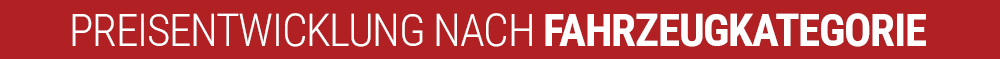
<style>
.page{position:relative;width:1000px;height:59px;background:#b12023}
.page>*{position:absolute;margin:0}
.t1{font:45.3px "RobotoCondensed-Light";letter-spacing:-0.03em;color:#ffffff}
.t2{font:45.3px "RobotoCondensed-Bold";letter-spacing:-0.03em;color:#ffffff}
</style>
<div class="page">
<p class="t1" style="left:72px;top:13px;width:854px;height:34px">PREISENTWICKLUNG NACH <span class="t2">FAHRZEUGKATEGORIE</span></p>
</div>
